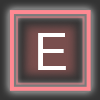
<style>
.page{position:relative;width:100px;height:100px}
.page>*{position:absolute;margin:0}
.t1{font:51.6px "ArialMT";color:#fffefe}
</style>
<div class="page">
<p class="t1" style="left:38px;top:33px;width:28px;height:37px">E</p>
</div>
